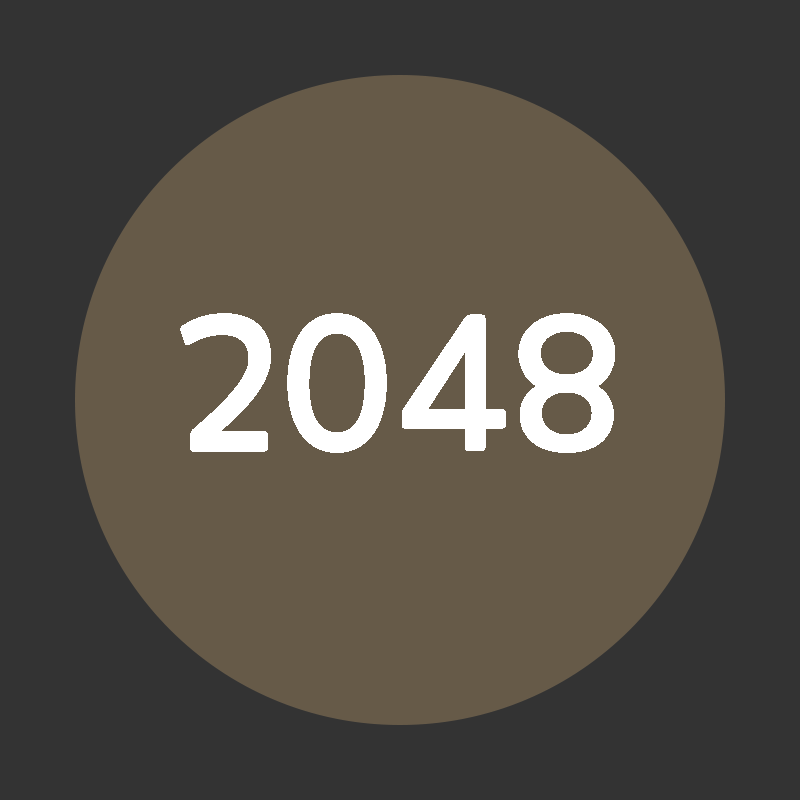
<style>
.page{position:relative;width:800px;height:800px;background:#333333}
.page>*{position:absolute;margin:0}
.t1{font:180px "CookieRun-Regular";color:#ffffff}
</style>
<div class="page">
<p class="t1" style="left:180px;top:313px;width:435px;height:140px">2048</p>
</div>
